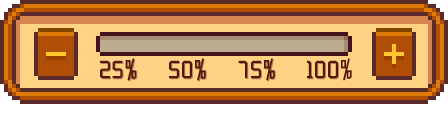
<style>
.page{position:relative;width:448px;height:128px;background:#ffd284}
.page>*{position:absolute;margin:0}
.t1{font:24px "zcoolqingkehuangyouti-Regular";color:#56160c}
.t2{font:24px "zcoolqingkehuangyouti-Regular"}
</style>
<div class="page">
<p class="t1" style="left:100px;top:58px;width:37px;height:23px">25%</p>
<p class="t2" style="left:101px;top:59px;width:37px;height:23px">25%</p>
<p class="t1" style="left:169px;top:58px;width:37px;height:23px">50%</p>
<p class="t2" style="left:170px;top:59px;width:37px;height:23px">50%</p>
<p class="t1" style="left:238px;top:58px;width:37px;height:23px">75%</p>
<p class="t2" style="left:239px;top:59px;width:37px;height:23px">75%</p>
<p class="t1" style="left:307px;top:58px;width:45px;height:23px">100%</p>
<p class="t2" style="left:308px;top:61px;width:31px;height:19px">100</p>
</div>
